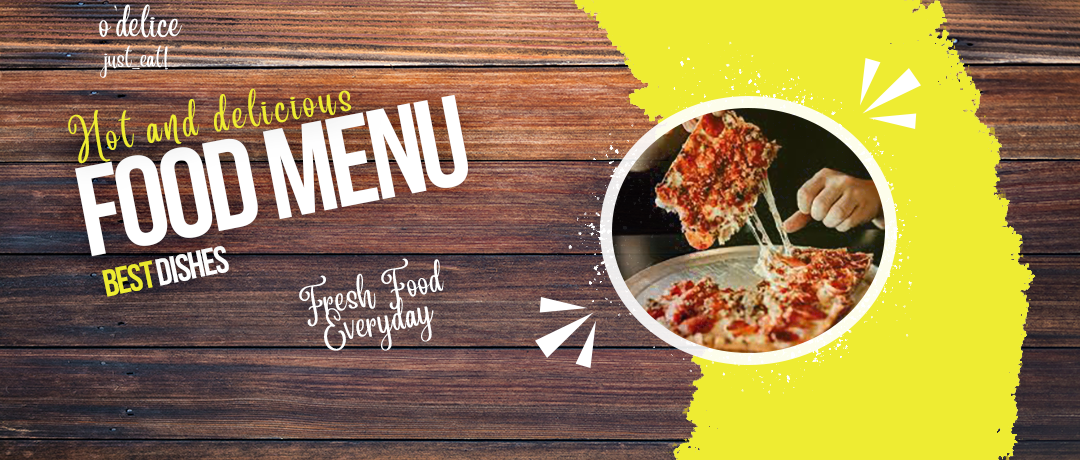
<style>
.page{position:relative;width:1080px;height:460px;background:#eeec32}
.page>*{position:absolute;margin:0}
.t1{font:30px "Angelina";letter-spacing:0.02em;color:#ffffff}
.t2{font:20px "Angelina";letter-spacing:0.02em;color:#ffffff}
.t3{font:34.7px "Angelina";letter-spacing:0.12em;color:#eeec32}
.t4{font:127.1px "BebasNeue-Bold";letter-spacing:-0.04em;color:#ffffff}
.t5{font:37.7px "BebasNeue-Bold";letter-spacing:-0.04em;color:#ffffff}
.t6{font:37.7px "BebasNeue-Bold";letter-spacing:-0.04em;color:#eeec32}
.t7{font:30px/30px "Angelina";letter-spacing:0.03em;color:#ffffff}
</style>
<div class="page">
<p class="t1" style="left:99px;top:4px;width:83px;height:34px">o'delice</p>
<p class="t2" style="left:100px;top:45px;width:68px;height:33px">just_eat!</p>
<p class="t3" style="left:68px;top:88px;width:284px;height:76px;rotate:-9deg">Hot and delicious</p>
<p class="t4" style="left:75px;top:94px;width:393px;height:163px;rotate:-11deg">FOOD MENU</p>
<p class="t5" style="left:102px;top:246px;width:127px;height:51px;rotate:-12deg"><span class="t6">Best </span>dishes</p>
<p class="t7" style="left:299px;top:258px;width:145px;height:93px;text-align:center;rotate:-11deg">Fresh Food<br>Everyday</p>
</div>
